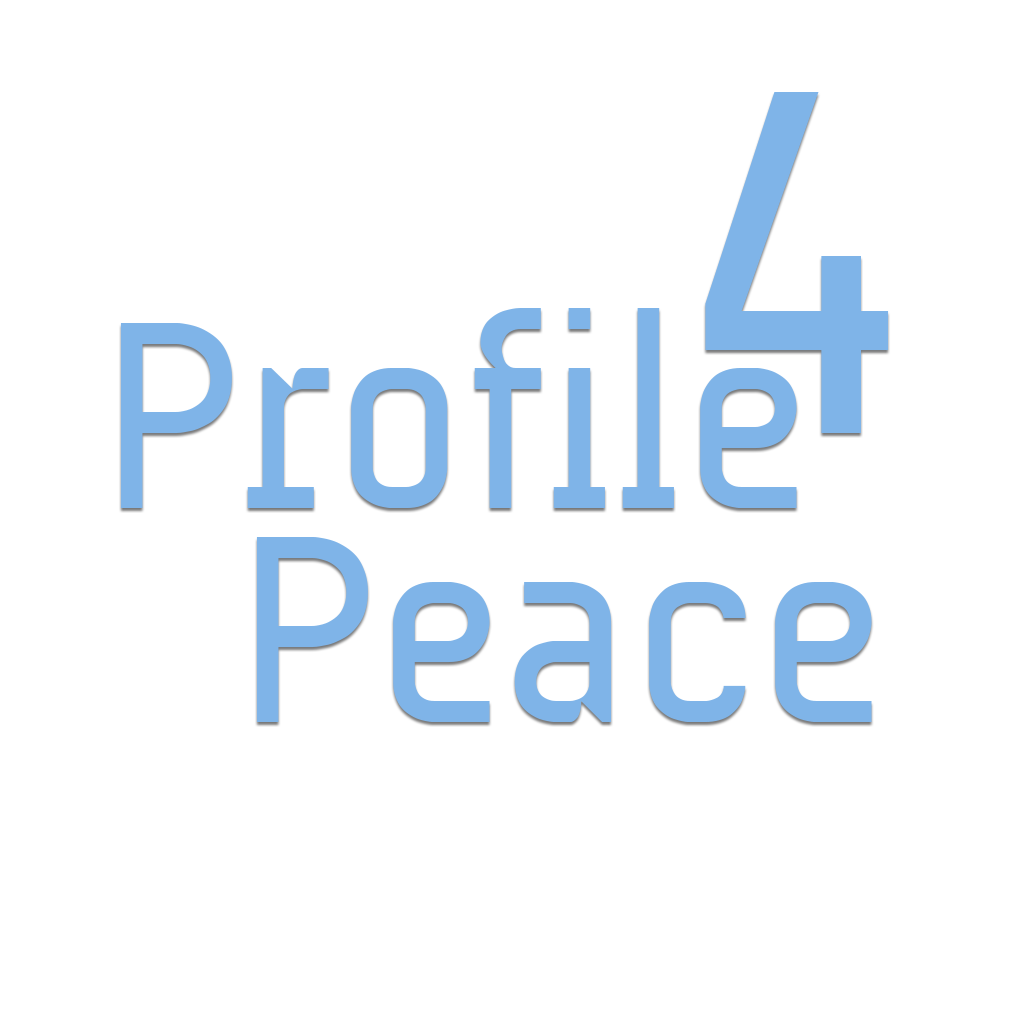
<style>
.page{position:relative;width:1024px;height:1024px;background:#ffffff}
.page>*{position:absolute;margin:0}
.t1{font:500px "AUdimat-Regular";color:#7fb4e8}
.t2{font:272px "AUdimat-Regular";color:#7fb4e8}
</style>
<div class="page">
<p class="t1" style="left:705px;top:92px;width:184px;height:341px">4</p>
<p class="t2" style="left:120px;top:308px;width:677px;height:200px">Profile</p>
<p class="t2" style="left:256px;top:537px;width:616px;height:185px">Peace</p>
</div>
